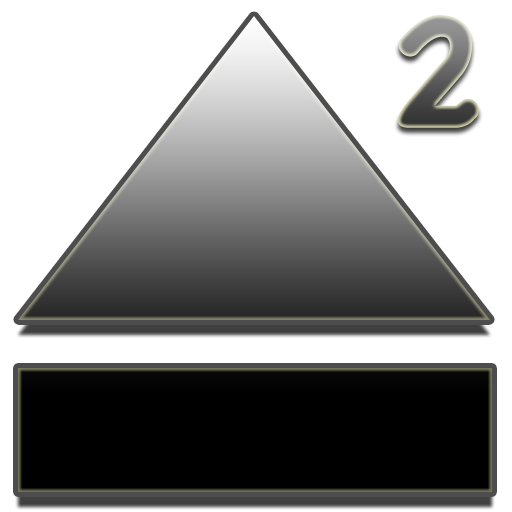
<style>
.page{position:relative;width:512px;height:512px;background:#ffffff}
.page>*{position:absolute;margin:0}
.t1{font:189.4px "AppleCasual"}
</style>
<div class="page">
<p class="t1" style="left:398px;top:15px;width:81px;height:113px">2</p>
</div>
